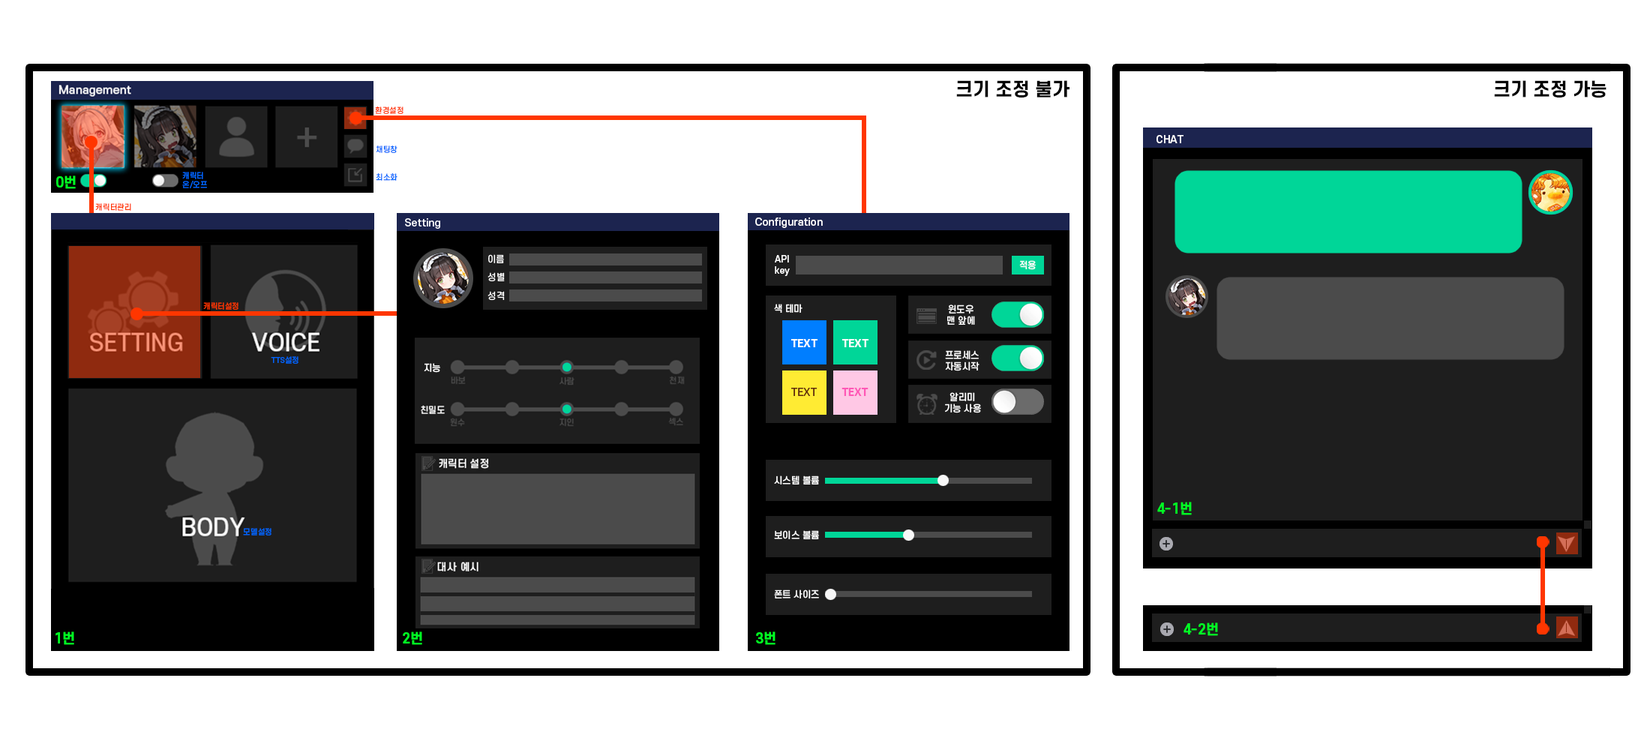
<style>
.page{position:relative;width:1650px;height:750px;background:#ffffff}
.page>*{position:absolute;margin:0}
.t1{font:18px "S-CoreDream-7ExtraBold";color:#000000}
.t2{font:7.5px "S-CoreDream-5Medium";color:#ff3600}
.t3{font:7.5px "S-CoreDream-5Medium";color:#0066ff}
.t4{font:13.5px "S-CoreDream-7ExtraBold";color:#00ff24}
.t5{font:9px "S-CoreDream-5Medium";color:#ffffff}
</style>
<div class="page">
<p class="t1" style="left:956px;top:80px;width:114px;height:18px">크기 조정 불가</p>
<p class="t1" style="left:1494px;top:80px;width:112px;height:18px">크기 조정 가능</p>
<p class="t2" style="left:375px;top:106px;width:29px;height:8px">환경설정</p>
<p class="t3" style="left:376px;top:146px;width:22px;height:7px">채팅창</p>
<p class="t3" style="left:182px;top:172px;width:25px;height:16px">캐릭터<br>온/오프</p>
<p class="t3" style="left:376px;top:173px;width:22px;height:8px">최소화</p>
<p class="t4" style="left:56px;top:176px;width:20px;height:13px">0번</p>
<p class="t2" style="left:95px;top:203px;width:36px;height:8px">캐릭터관리</p>
<p class="t5" style="left:775px;top:255px;width:15px;height:21px">API<br>key</p>
<p class="t5" style="left:1019px;top:260px;width:17px;height:10px">적용</p>
<p class="t2" style="left:203px;top:302px;width:35px;height:8px">캐릭터설정</p>
<p class="t5" style="left:774px;top:304px;width:28px;height:9px">색 테마</p>
<p class="t5" style="left:947px;top:304px;width:28px;height:21px;text-align:center">윈도우<br>맨 앞에</p>
<p class="t5" style="left:945px;top:350px;width:35px;height:21px;text-align:center">프로세스<br>자동시작</p>
<p class="t3" style="left:271px;top:356px;width:27px;height:8px">TTS설정</p>
<p class="t5" style="left:424px;top:363px;width:16px;height:10px">지능</p>
<p class="t5" style="left:945px;top:392px;width:36px;height:21px;text-align:center">알리미<br>기능 사용</p>
<p class="t5" style="left:774px;top:476px;width:45px;height:8px">시스템 볼륨</p>
<p class="t4" style="left:1157px;top:502px;width:35px;height:13px">4-1번</p>
<p class="t3" style="left:243px;top:528px;width:29px;height:8px">모델설정</p>
<p class="t5" style="left:774px;top:530px;width:45px;height:9px">보이스 볼륨</p>
<p class="t5" style="left:774px;top:590px;width:45px;height:8px">폰트 사이즈</p>
<p class="t4" style="left:1184px;top:622px;width:34px;height:14px">4-2번</p>
<p class="t4" style="left:56px;top:632px;width:18px;height:13px">1번</p>
<p class="t4" style="left:403px;top:632px;width:19px;height:13px">2번</p>
<p class="t4" style="left:756px;top:632px;width:20px;height:13px">3번</p>
</div>
